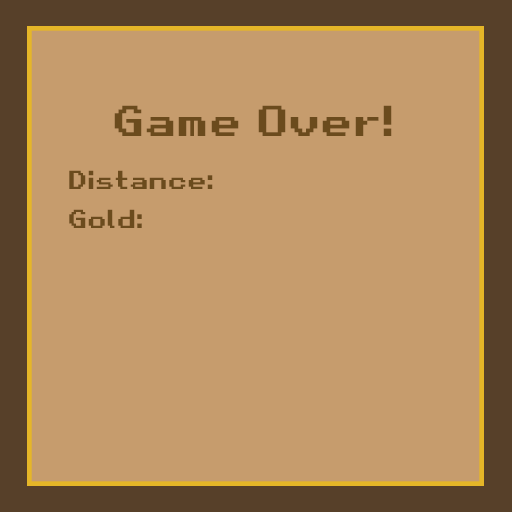
<style>
.page{position:relative;width:512px;height:512px;background:#c69c6d}
.page>*{position:absolute;margin:0}
.t1{font:41.7px "RetroGaming";color:#6b4b1d}
.t2{font:25px "RetroGaming";color:#6b4b1d}
</style>
<div class="page">
<p class="t1" style="left:114px;top:105px;width:278px;height:31px">Game Over!</p>
<p class="t2" style="left:69px;top:170px;width:144px;height:19px">Distance:</p>
<p class="t2" style="left:69px;top:209px;width:73px;height:19px">Gold:</p>
</div>
